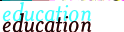
<style>
.page{position:relative;width:124px;height:32px;background:#ffffff}
.page>*{position:absolute;margin:0}
.t1{font:30px "MrsEavesItalic";color:#3fffff}
</style>
<div class="page">
<p class="t1" style="left:2px;top:2px;width:90px;height:20px">education</p>
</div>
